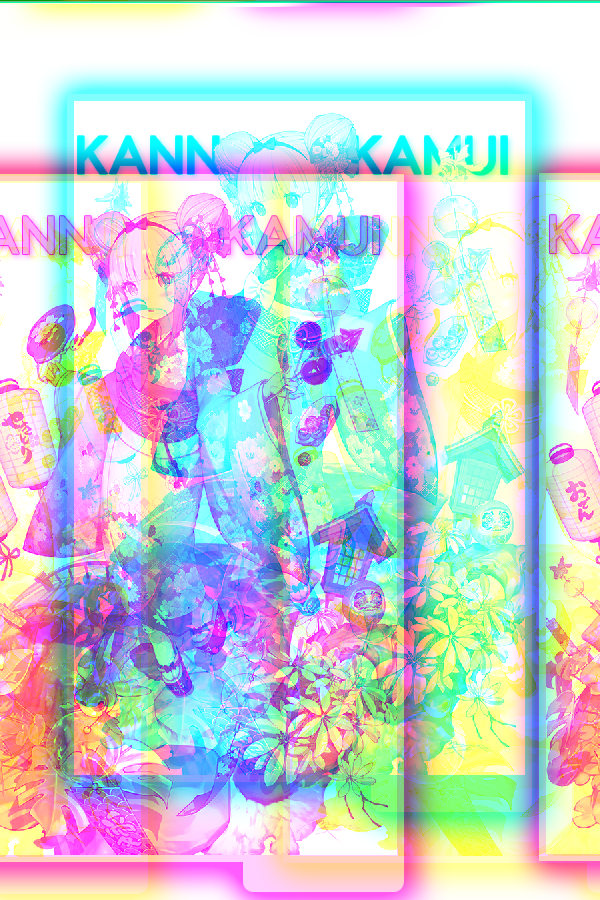
<style>
.page{position:relative;width:600px;height:900px}
.page>*{position:absolute;margin:0}
.t1{font:50.2px "Ancillary-Bold"}
</style>
<div class="page">
<p class="t1" style="left:78px;top:133px;width:182px;height:38px">KANNA</p>
<p class="t1" style="left:352px;top:133px;width:155px;height:39px">KAMUI</p>
</div>
